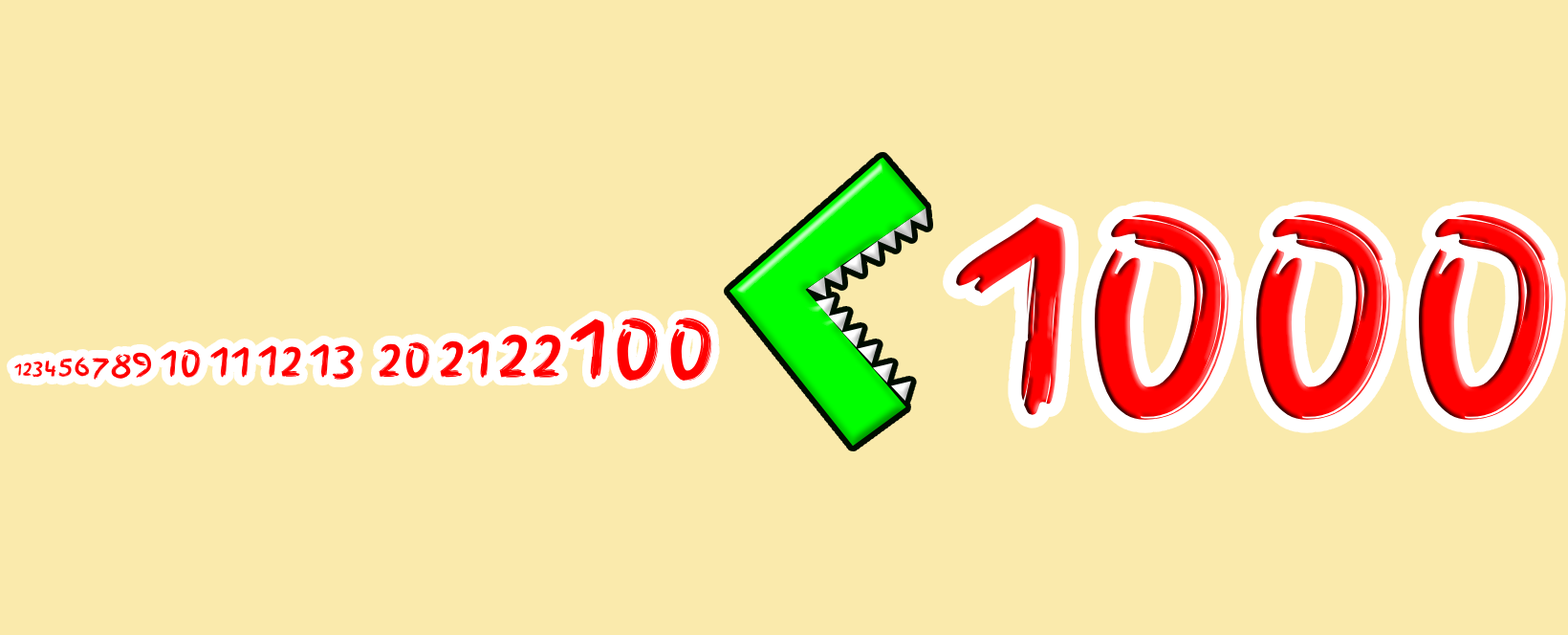
<style>
.page{position:relative;width:1568px;height:635px;background:#faeaac}
.page>*{position:absolute;margin:0}
.t1{font:286.8px "FingerPaint-Regular";color:#ff0000}
.t2{font:87.5px "FingerPaint-Regular";letter-spacing:0.046em;color:#ff0000}
.t3{font:17.5px "FingerPaint-Regular";letter-spacing:0.046em;color:#ff0000}
.t4{font:19.7px "FingerPaint-Regular";letter-spacing:0.046em;color:#ff0000}
.t5{font:21.9px "FingerPaint-Regular";letter-spacing:0.046em;color:#ff0000}
.t6{font:24.1px "FingerPaint-Regular";letter-spacing:0.046em;color:#ff0000}
.t7{font:26.2px "FingerPaint-Regular";letter-spacing:0.046em;color:#ff0000}
.t8{font:28.4px "FingerPaint-Regular";letter-spacing:0.046em;color:#ff0000}
.t9{font:30.6px "FingerPaint-Regular";letter-spacing:0.046em;color:#ff0000}
.t10{font:32.8px "FingerPaint-Regular";letter-spacing:0.046em;color:#ff0000}
.t11{font:35px "FingerPaint-Regular";letter-spacing:0.046em;color:#ff0000}
.t12{font:39.4px "FingerPaint-Regular";letter-spacing:0.046em;color:#ff0000}
.t13{font:43.7px "FingerPaint-Regular";letter-spacing:0.046em;color:#ff0000}
.t14{font:45.9px "FingerPaint-Regular";letter-spacing:0.046em;color:#ff0000}
.t15{font:48.1px "FingerPaint-Regular";letter-spacing:0.046em;color:#ff0000}
.t16{font:50.3px "FingerPaint-Regular";letter-spacing:0.046em;color:#ff0000}
.t17{font:54.7px "FingerPaint-Regular";letter-spacing:0.046em;color:#ff0000}
.t18{font:65.6px "FingerPaint-Regular";letter-spacing:0.046em;color:#ff0000}
</style>
<div class="page">
<p class="t1" style="left:956px;top:214px;width:597px;height:206px">1000</p>
<p class="t2" style="left:14px;top:317px;width:698px;height:64px"><span class="t3">1</span><span class="t4">2</span><span class="t5">3</span><span class="t6">4</span><span class="t7">5</span><span class="t8">6</span><span class="t9">7</span><span class="t10">8</span><span class="t11">9 </span><span class="t12">10 </span><span class="t13">11 </span><span class="t14">12 </span><span class="t15">13 </span><span class="t16">20 </span><span class="t17">21 </span><span class="t18">22 </span>100</p>
</div>
